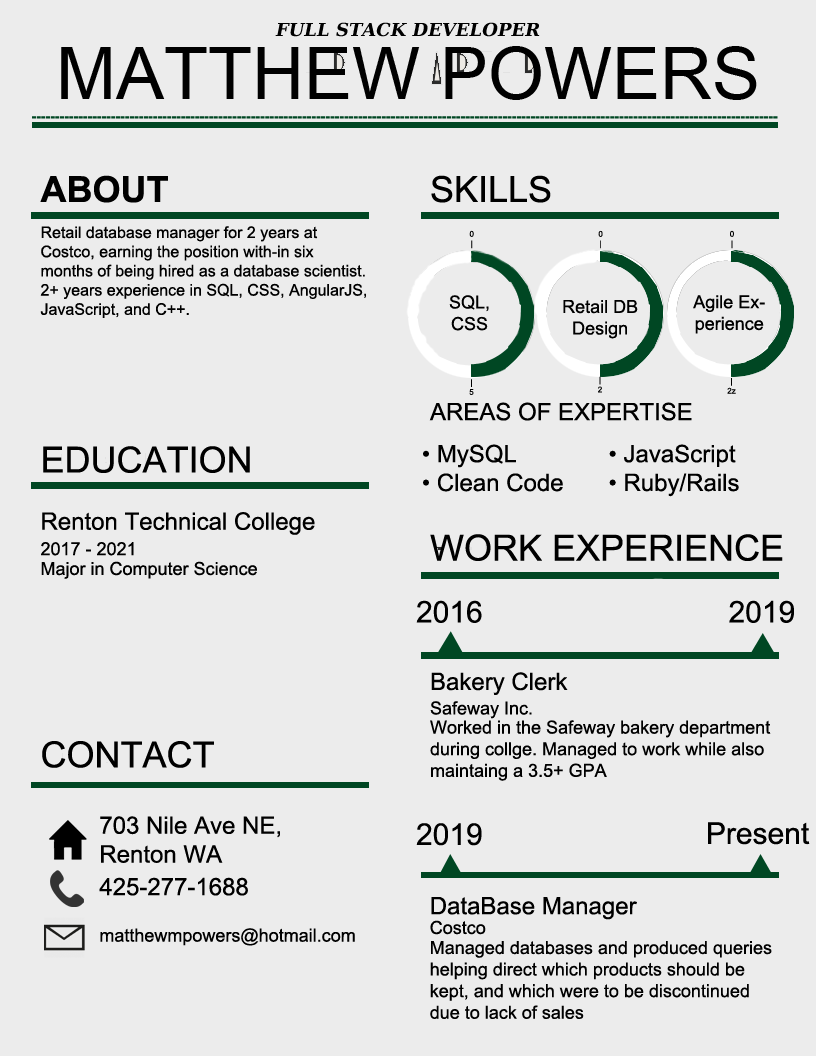
<style>
.page{position:relative;width:816px;height:1056px;background:#ececec}
.page>*{position:absolute;margin:0}
.t1{font:18px "DejaVuSerif-BoldItalic";color:#000000;text-transform:uppercase}
.t2{font:72px "ArialMT";color:#000000;text-transform:uppercase}
.t3{font:14px "Arial-BoldMT";color:#004723;text-transform:uppercase}
.t4{font:36px "Arial-BoldMT";color:#000000;text-transform:uppercase}
.t5{font:36px "ArialMT";color:#000000;text-transform:uppercase}
.t6{font:16px "ArialMT";color:#000000}
.t7{font:8px "ArialMT";color:#000000}
.t8{font:8px "ArialMT";color:#0e0e0e}
.t9{font:18px "ArialMT";color:#000000}
.t10{font:24px "ArialMT";color:#000000}
.t11{font:36px "ArialMT";color:#000000}
.t12{font:30px "ArialMT";color:#000000}
</style>
<div class="page">
<p class="t1" style="left:275px;top:22px;width:265px;height:15px">Full Stack Developer</p>
<p class="t2" style="left:61px;top:46px;width:696px;height:54px">Matthew Powers</p>
<p class="t3" style="left:32px;top:116px;width:746px;height:3px">----------------------------------------------------------------------------------------------------------------------------------------------------------------</p>
<p class="t4" style="left:40px;top:175px;width:128px;height:28px">About</p>
<p class="t5" style="left:431px;top:175px;width:120px;height:28px">Skills</p>
<p class="t6" style="left:40px;top:226px;width:326px;height:92px">Retail database manager for 2 years at Costco, earning the position with-in six months of being hired as a database scientist. 2+ years experience in SQL, CSS, AngularJS, JavaScript, and C++.</p>
<p class="t7" style="left:469px;top:230px;width:5px;height:19px;text-align:center">0<br>|</p>
<p class="t8" style="left:598px;top:230px;width:5px;height:19px;text-align:center">0<br>|</p>
<p class="t7" style="left:730px;top:230px;width:4px;height:19px;text-align:center">0<br>|</p>
<p class="t9" style="left:449px;top:295px;width:40px;height:36px;text-align:center">SQL, CSS</p>
<p class="t9" style="left:563px;top:300px;width:75px;height:39px;text-align:center">Retail DB Design</p>
<p class="t9" style="left:693px;top:295px;width:72px;height:39px;text-align:center">Agile Experience</p>
<p class="t8" style="left:598px;top:376px;width:4px;height:17px;text-align:center">|<br>2</p>
<p class="t7" style="left:469px;top:379px;width:5px;height:16px;text-align:center">|<br>5</p>
<p class="t7" style="left:727px;top:378px;width:9px;height:16px;text-align:center">|<br>2z</p>
<p class="t10" style="left:429px;top:402px;width:263px;height:19px">AREAS OF EXPERTISE</p>
<p class="t5" style="left:43px;top:446px;width:207px;height:27px">Education</p>
<p class="t10" style="left:423px;top:444px;width:316px;height:53px">• MySQL    • JavaScript<br>• Clean Code   • Ruby/Rails</p>
<p class="t10" style="left:42px;top:512px;width:273px;height:23px">Renton Technical College</p>
<p class="t11" style="left:430px;top:534px;width:353px;height:27px">WORK EXPERIENCE</p>
<p class="t9" style="left:41px;top:542px;width:93px;height:14px">2017 - 2021</p>
<p class="t9" style="left:41px;top:561px;width:216px;height:18px">Major in Computer Science</p>
<p class="t12" style="left:416px;top:600px;width:66px;height:23px">2016</p>
<p class="t12" style="left:729px;top:600px;width:65px;height:23px">2019</p>
<p class="t10" style="left:431px;top:672px;width:137px;height:23px">Bakery Clerk</p>
<p class="t9" style="left:430px;top:701px;width:102px;height:18px">Safeway Inc.</p>
<p class="t9" style="left:430px;top:720px;width:341px;height:61px">Worked in the Safeway bakery department during collge. Managed to work while also maintaing a 3.5+ GPA</p>
<p class="t11" style="left:42px;top:741px;width:172px;height:27px">CONTACT</p>
<p class="t10" style="left:100px;top:816px;width:180px;height:47px">703 Nile Ave NE, Renton WA</p>
<p class="t12" style="left:708px;top:822px;width:102px;height:23px">Present</p>
<p class="t12" style="left:416px;top:823px;width:66px;height:23px">2019</p>
<p class="t10" style="left:99px;top:877px;width:149px;height:19px">425-277-1688</p>
<p class="t10" style="left:431px;top:897px;width:206px;height:23px">DataBase Manager</p>
<p class="t9" style="left:100px;top:928px;width:255px;height:18px">matthewmpowers@hotmail.com</p>
<p class="t9" style="left:430px;top:920px;width:56px;height:15px">Costco</p>
<p class="t9" style="left:430px;top:941px;width:342px;height:78px">Managed databases and produced queries helping direct which products should be kept, and which were to be discontinued due to lack of sales</p>
</div>
